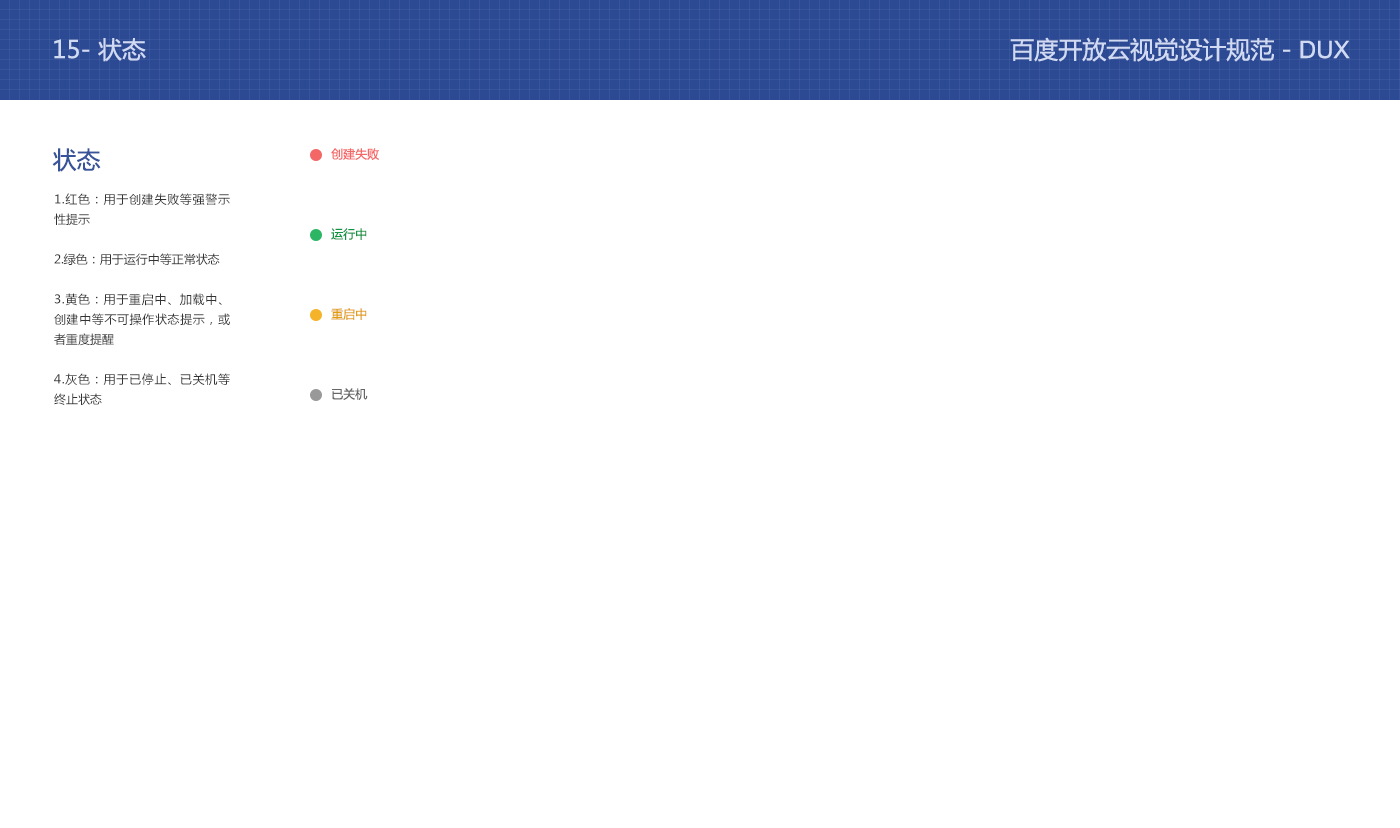
<style>
.page{position:relative;width:1400px;height:828px;background:#ffffff}
.page>*{position:absolute;margin:0}
.t1{font:24px "MicrosoftYaHei";color:#d0daf3}
.t2{font:24px "ArialMT";color:#d0daf3}
.t3{font:24px "MicrosoftYaHei";color:#375399}
.t4{font:12px/65px "MicrosoftYaHei";color:#f46767}
.t5{font:14px/60px "MicrosoftYaHei";color:#333333}
.t6{font:12px/80px "MicrosoftYaHei";color:#109444}
.t7{font:12px/80px "MicrosoftYaHei";color:#e19d0c}
.t8{font:12px/80px "MicrosoftYaHei";color:#666666}
.t9{font:12px/20px "MicrosoftYaHei";color:#333333}
</style>
<div class="page">
<p class="t1" style="left:54px;top:38px;width:92px;height:24px">15- 状态</p>
<p class="t1" style="left:1010px;top:37px;width:340px;height:25px">百度开放云视觉设计规范 - <span class="t2">DUX</span></p>
<p class="t3" style="left:52px;top:148px;width:49px;height:24px">状态</p>
<p class="t4" style="left:331px;top:148px;width:49px;height:252px"><span class="t5"><br>    </span> 创建失败<br>     <span class="t6">运行中<br></span><span class="t7">     重启中<br>     </span><span class="t8">已关机</span></p>
<p class="t9" style="left:54px;top:193px;width:176px;height:212px;text-align:justify">1.红色：用于创建失败等强警示性提示<br><br>2.绿色：用于运行中等正常状态<br><br>3.黄色：用于重启中、加载中、创建中等不可操作状态提示，或者重度提醒<br><br>4.灰色：用于已停止、已关机等终止状态</p>
</div>
